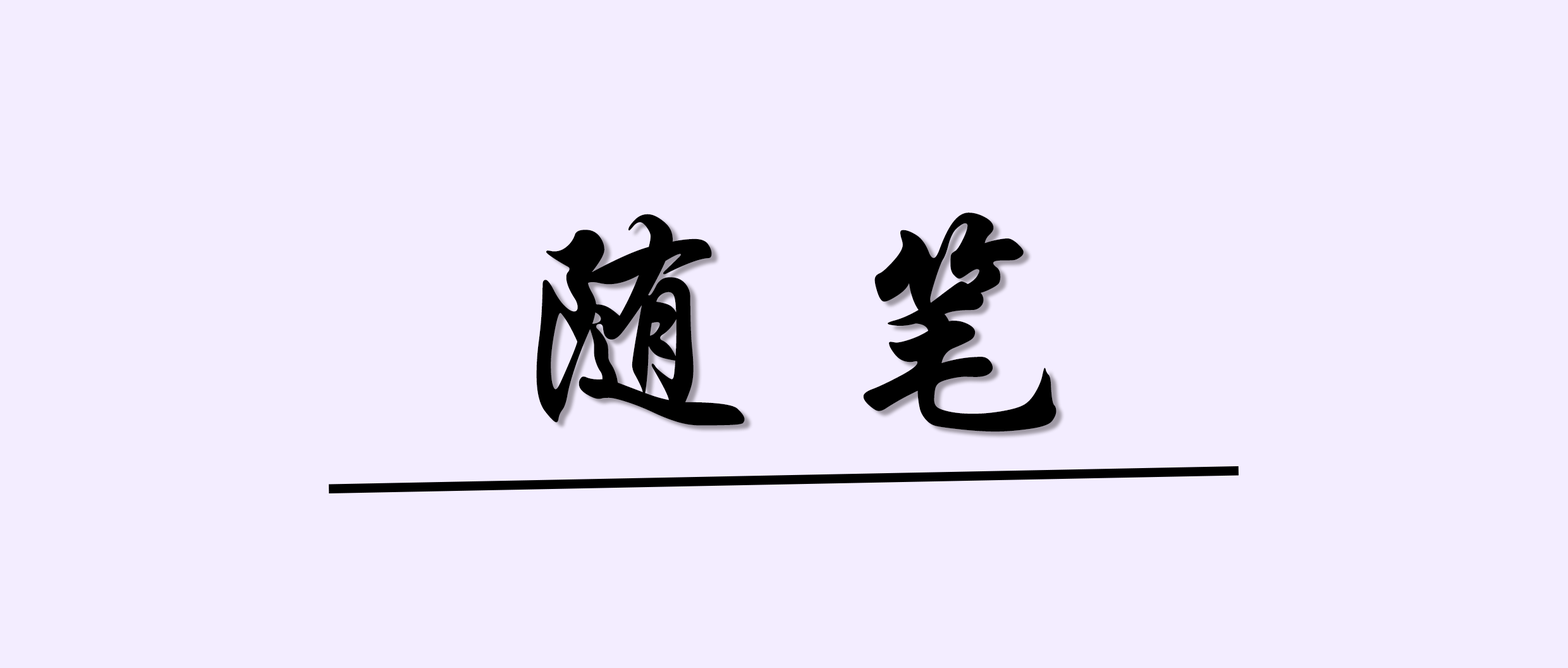
<style>
.page{position:relative;width:1568px;height:668px;background:#f3edff}
.page>*{position:absolute;margin:0}
.t1{font:263.4px "STXingkai";letter-spacing:0.2em;color:#000000}
</style>
<div class="page">
<p class="t1" style="left:536px;top:212px;width:521px;height:220px">随笔</p>
</div>
